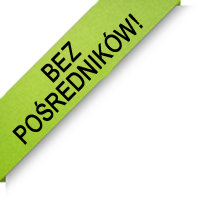
<style>
.page{position:relative;width:200px;height:200px;background:#ffffff}
.page>*{position:absolute;margin:0}
.t1{font:25px/24px "ArialNarrow";color:#000000;font-weight:bold}
</style>
<div class="page">
<p class="t1" style="left:12px;top:13px;width:131px;height:132px;text-align:center;rotate:-45deg">BEZ<br>POŚREDNIKÓW!</p>
</div>
